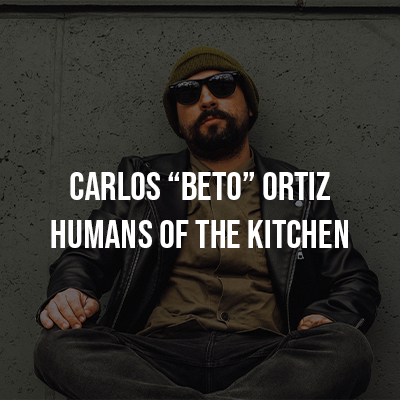
<style>
.page{position:relative;width:400px;height:400px}
.page>*{position:absolute;margin:0}
.t1{font:40px "BebasNeue-Regular";color:#ffffff}
</style>
<div class="page">
<p class="t1" style="left:51px;top:172px;width:297px;height:76px;text-align:center">Carlos “beto” Ortiz<br>humans of the kitchen</p>
</div>
